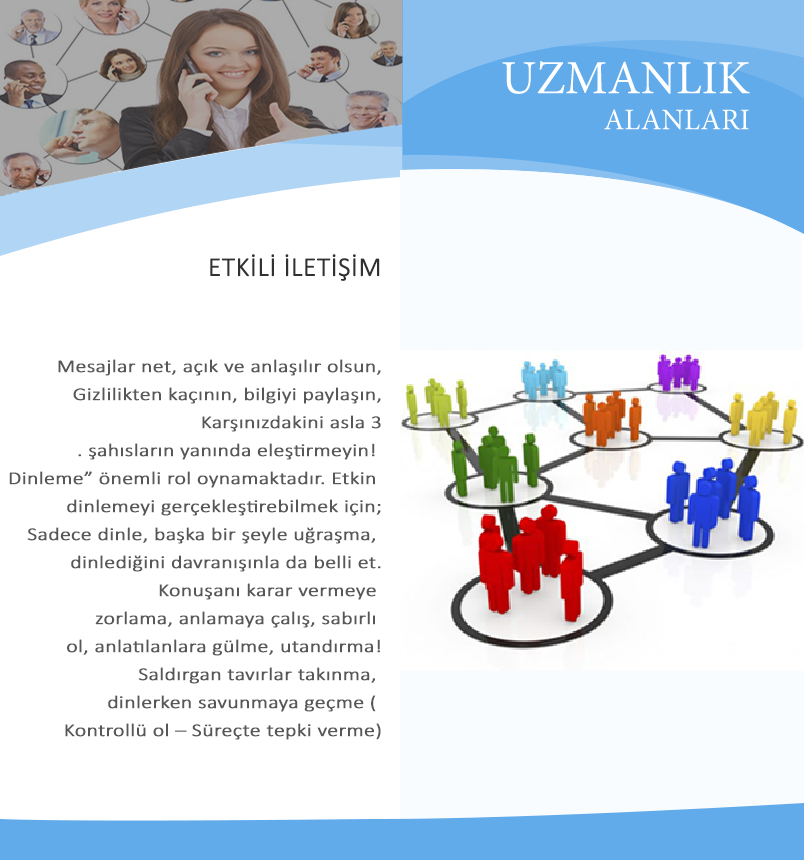
<style>
.page{position:relative;width:804px;height:860px;background:#ffffff}
.page>*{position:absolute;margin:0}
.t1{font:47.6px "MinionPro-Regular";color:#ffffff}
.t2{font:30px "MinionPro-Regular";color:#ffffff}
.t3{font:27px "Calibri-Light";color:#313131;font-weight:bold}
.t4{font:18.1px/28px "Calibri-Light";color:#575757;font-weight:bold;scale:1.18 1}
</style>
<div class="page">
<p class="t1" style="left:502px;top:61px;width:248px;height:69px;text-align:right">UZMANLIK<br><span class="t2"> ALANLARI</span></p>
<p class="t3" style="left:210px;top:254px;width:170px;height:27px">ETKİLİ İLETİŞİM</p>
<p class="t4" style="left:9px;top:359px;width:372px;height:381px;text-align:right">Mesajlar net, açık ve anlaşılır olsun,<br>Gizlilikten kaçının, bilgiyi paylaşın,<br>Karşınızdakini asla 3<br>. şahısların yanında eleştirmeyin! <br>Dinleme” önemli rol oynamaktadır. Etkin <br>dinlemeyi gerçekleştirebilmek için;<br>Sadece dinle, başka bir şeyle uğraşma, <br>dinlediğini davranışınla da belli et.<br> Konuşanı karar vermeye <br>zorlama, anlamaya çalış, sabırlı <br>ol, anlatılanlara gülme, utandırma!<br> Saldırgan tavırlar takınma, <br>dinlerken savunmaya geçme ( <br>Kontrollü ol – Süreçte tepki verme)</p>
</div>
